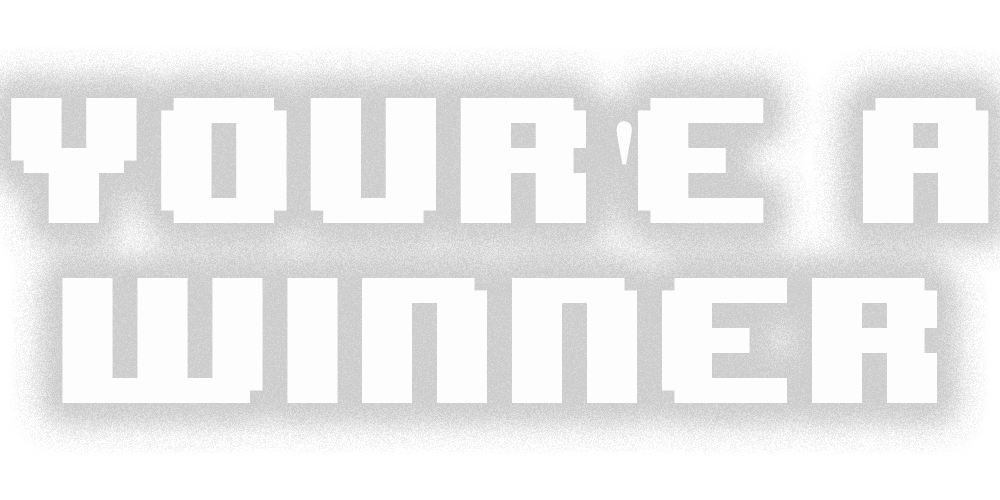
<style>
.page{position:relative;width:1000px;height:500px;background:#fdfdfd}
.page>*{position:absolute;margin:0}
.t1{font:150px "8BITWONDERNominal";color:#fefefe}
.t2{font:150px "TimesNewRomanPSMT";color:#fefefe}
</style>
<div class="page">
<p class="t1" style="left:11px;top:98px;width:978px;height:305px;text-align:center">YOur<span class="t2">'</span>e a<br>WInner</p>
</div>
